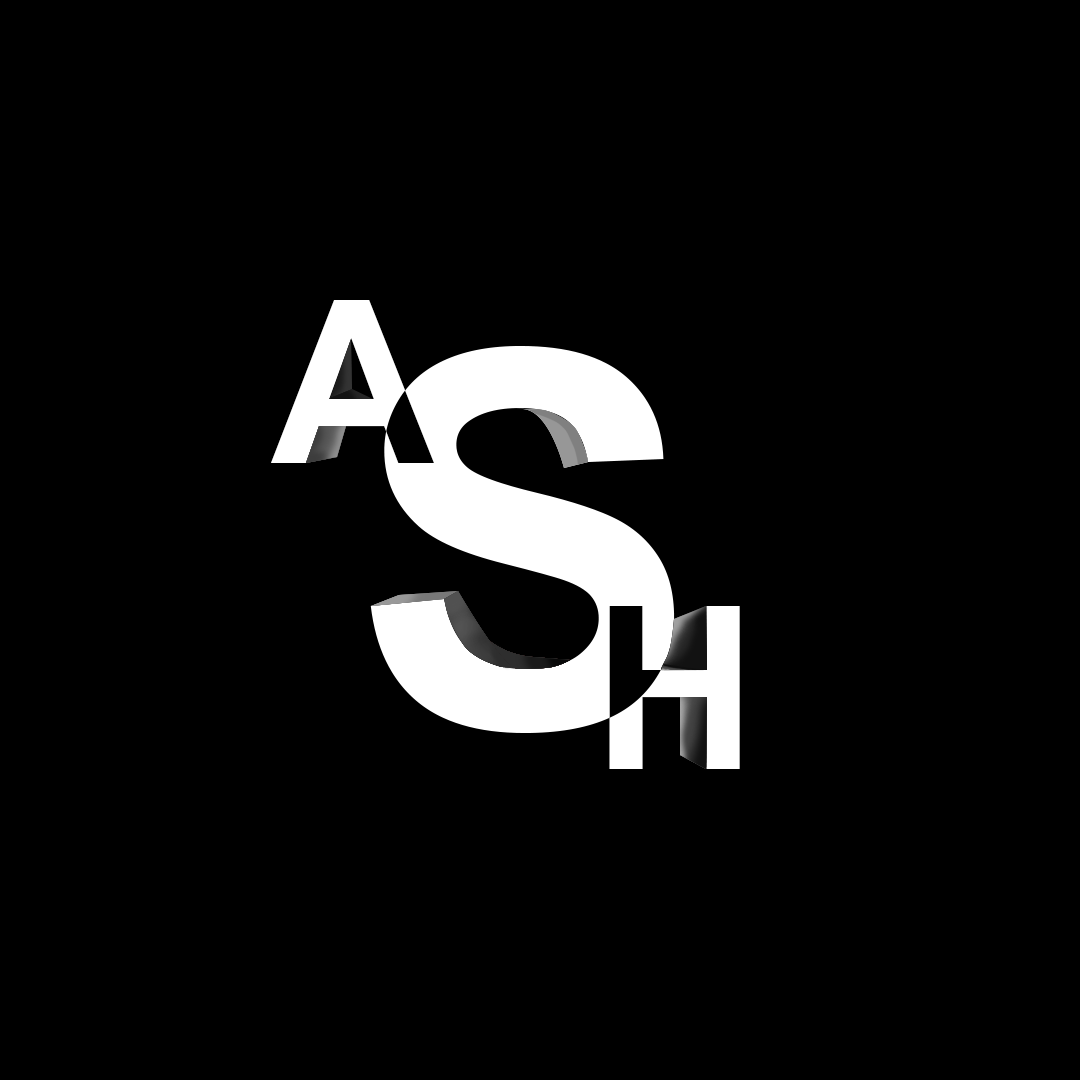
<style>
.page{position:relative;width:1080px;height:1080px;background:#000000}
.page>*{position:absolute;margin:0}
.t1{font:227.2px "Arial-BoldMT";color:#ffffff}
</style>
<div class="page">
<p class="t1" style="left:271px;top:300px;width:163px;height:163px">A</p>
<p class="t1" style="left:609px;top:606px;width:131px;height:163px">H</p>
</div>
